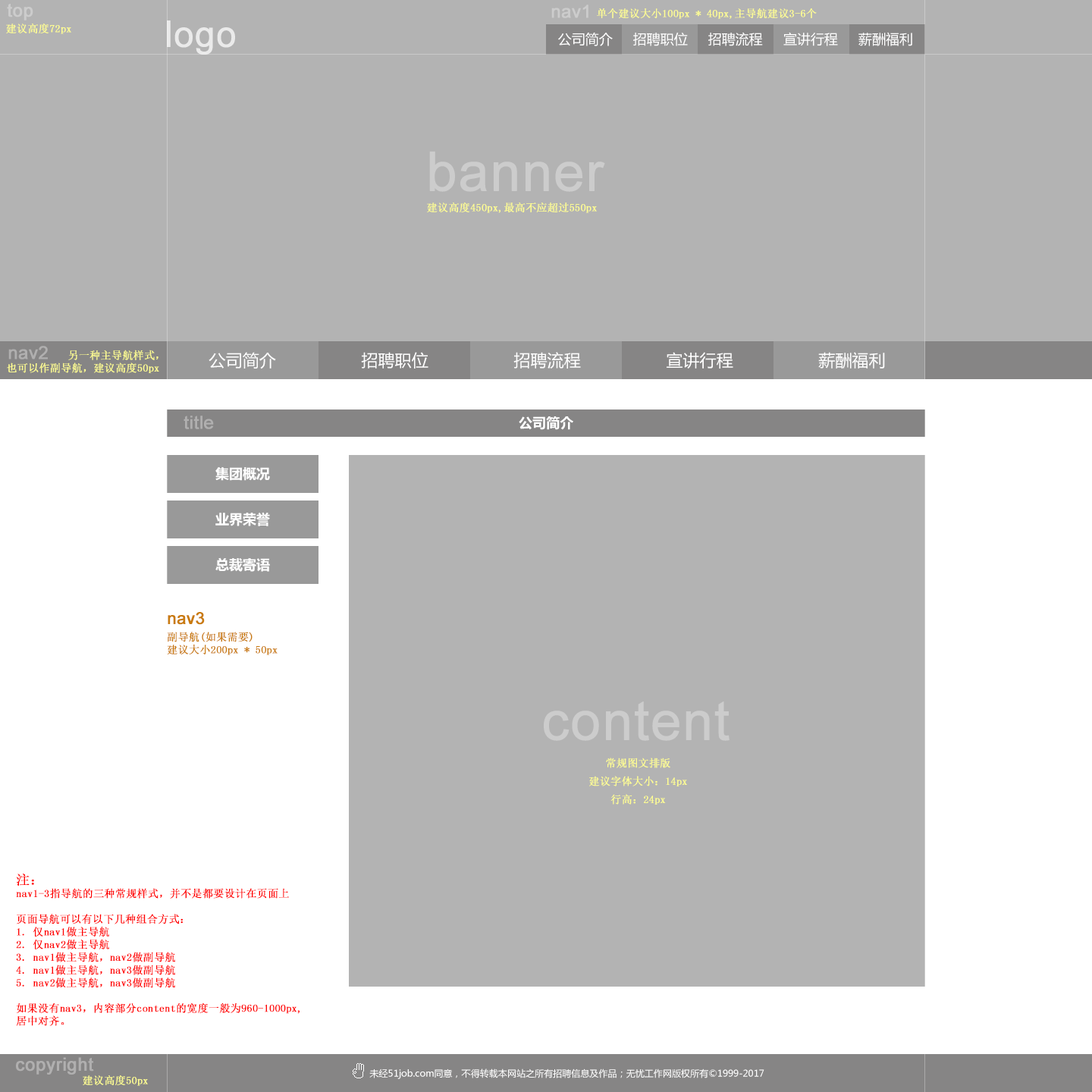
<style>
.page{position:relative;width:1092px;height:1092px;background:#b3b3b3}
.page>*{position:absolute;margin:0}
.t1{font:18.2px "ArialMT";color:#cccccc;font-weight:bold}
.t2{font:18px "ArialMT";color:#cccccc;font-weight:bold}
.t3{font:10.6px "SimSun";color:#fffe92;font-weight:bold}
.t4{font:36.4px "ArialMT";color:#ffffff;font-weight:bold}
.t5{font:13.6px "MicrosoftYaHei";color:#ffffff}
.t6{font:54.6px "ArialMT";color:#cccccc;font-weight:bold}
.t7{font:18px "ArialMT";color:#b0afaf;font-weight:bold}
.t8{font:16.7px "MicrosoftYaHei";letter-spacing:0.005em;color:#ffffff}
.t9{font:13.6px "MicrosoftYaHei-Bold";letter-spacing:0.005em;color:#ffffff}
.t10{font:13.6px/45.5px "MicrosoftYaHei-Bold";color:#ffffff}
.t11{font:16.7px "ArialMT";color:#c97b0d;font-weight:bold}
.t12{font:10.6px "SimSun";color:#c97b0d;font-weight:bold}
.t13{font:10.6px/18.2px "SimSun";color:#fffe92;font-weight:bold}
.t14{font:10.6px "SimSun";color:#ff0000;font-weight:bold}
.t15{font:13.6px "SimSun";color:#ff0000;font-weight:bold}
.t16{font:18.2px "ArialMT";color:#b0afaf;font-weight:bold}
.t17{font:9.1px "MicrosoftYaHei";letter-spacing:0.005em;color:#ffffff}
</style>
<div class="page">
<p class="t1" style="left:7px;top:4px;width:26px;height:16px">top</p>
<p class="t2" style="left:551px;top:5px;width:37px;height:13px">nav1</p>
<p class="t3" style="left:597px;top:8px;width:220px;height:11px">单个建议大小100px * 40px,主导航建议3-6个</p>
<p class="t3" style="left:6px;top:24px;width:65px;height:10px">建议高度72px</p>
<p class="t4" style="left:167px;top:20px;width:68px;height:35px">logo</p>
<p class="t5" style="left:558px;top:32px;width:354px;height:14px">公司简介     招聘职位     招聘流程     宣讲行程     薪酬福利</p>
<p class="t6" style="left:429px;top:151px;width:176px;height:41px">banner</p>
<p class="t3" style="left:427px;top:202px;width:170px;height:11px">建议高度450px,最高不应超过550px</p>
<p class="t3" style="left:7px;top:350px;width:152px;height:23px;text-align:justify">另一种主导航样式，<br>也可以作副导航，建议高度50px</p>
<p class="t7" style="left:8px;top:346px;width:40px;height:13px">nav2</p>
<p class="t8" style="left:209px;top:352px;width:676px;height:17px">公司简介                 招聘职位                 招聘流程                 宣讲行程                 薪酬福利</p>
<p class="t7" style="left:184px;top:416px;width:30px;height:13px">title</p>
<p class="t9" style="left:519px;top:416px;width:54px;height:14px">公司简介</p>
<p class="t10" style="left:215px;top:467px;width:55px;height:105px;text-align:center">集团概况<br>业界荣誉<br>总裁寄语</p>
<p class="t11" style="left:168px;top:612px;width:37px;height:13px">nav3</p>
<p class="t12" style="left:167px;top:632px;width:111px;height:23px;text-align:justify">副导航(如果需要)<br>建议大小200px * 50px</p>
<p class="t6" style="left:544px;top:701px;width:186px;height:40px">content</p>
<p class="t13" style="left:589px;top:758px;width:98px;height:47px;text-align:center">常规图文排版<br>建议字体大小：14px<br>行高：24px</p>
<p class="t14" style="left:16px;top:874px;width:284px;height:152px;text-align:justify"><span class="t15">注：<br></span>nav1-3指导航的三种常规样式，并不是都要设计在页面上<br><br>页面导航可以有以下几种组合方式：<br>1. 仅nav1做主导航<br>2. 仅nav2做主导航<br>3. nav1做主导航，nav2做副导航<br>4. nav1做主导航，nav3做副导航<br>5. nav2做主导航，nav3做副导航<br><br>如果没有nav3，内容部分content的宽度一般为960-1000px,<br>居中对齐。</p>
<p class="t16" style="left:16px;top:1057px;width:78px;height:18px">copyright</p>
<p class="t17" style="left:369px;top:1068px;width:395px;height:11px">未经51job.com同意，不得转载本网站之所有招聘信息及作品；无忧工作网版权所有©1999-2017</p>
<p class="t3" style="left:83px;top:1075px;width:65px;height:11px">建议高度50px</p>
</div>
